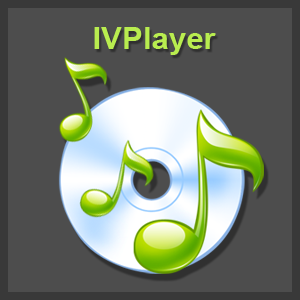
<style>
.page{position:relative;width:300px;height:300px;background:#4d4d4d}
.page>*{position:absolute;margin:0}
.t1{font:31.2px "Arial-BoldMT";color:#b9ed4f}
</style>
<div class="page">
<p class="t1" style="left:94px;top:27px;width:122px;height:28px">IVPlayer</p>
</div>
